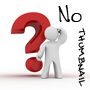
<style>
.page{position:relative;width:90px;height:90px;background:#ffffff}
.page>*{position:absolute;margin:0}
.t1{font:22px "CrosbysHand";color:#000000}
.t2{font:14px "CrosbysHand";color:#000000}
</style>
<div class="page">
<p class="t1" style="left:58px;top:5px;width:24px;height:17px">No</p>
<p class="t2" style="left:77px;top:28px;width:9px;height:59px;rotate:90deg">thumbnail</p>
</div>
